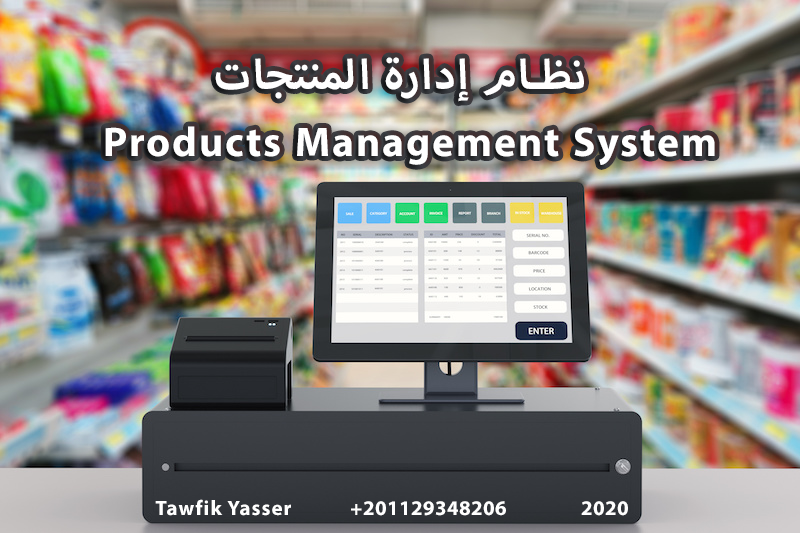
<style>
.page{position:relative;width:800px;height:533px}
.page>*{position:absolute;margin:0}
.t1{font:58.3px "MyriadArabic-Bold";letter-spacing:0.03em;color:#ffffff}
.t2{font:29.2px "MyriadArabic-Bold";letter-spacing:0.03em;color:#ffffff}
</style>
<div class="page">
<p class="t1" style="left:215px;top:57px;width:369px;height:45px">نظام إدارة المنتجات</p>
<p class="t1" style="left:105px;top:126px;width:610px;height:39px">Products Management System</p>
<p class="t2" style="left:155px;top:499px;width:136px;height:17px">Tawfik Yasser</p>
<p class="t2" style="left:351px;top:501px;width:155px;height:15px">+201129348206</p>
<p class="t2" style="left:581px;top:501px;width:47px;height:15px">2020</p>
</div>
